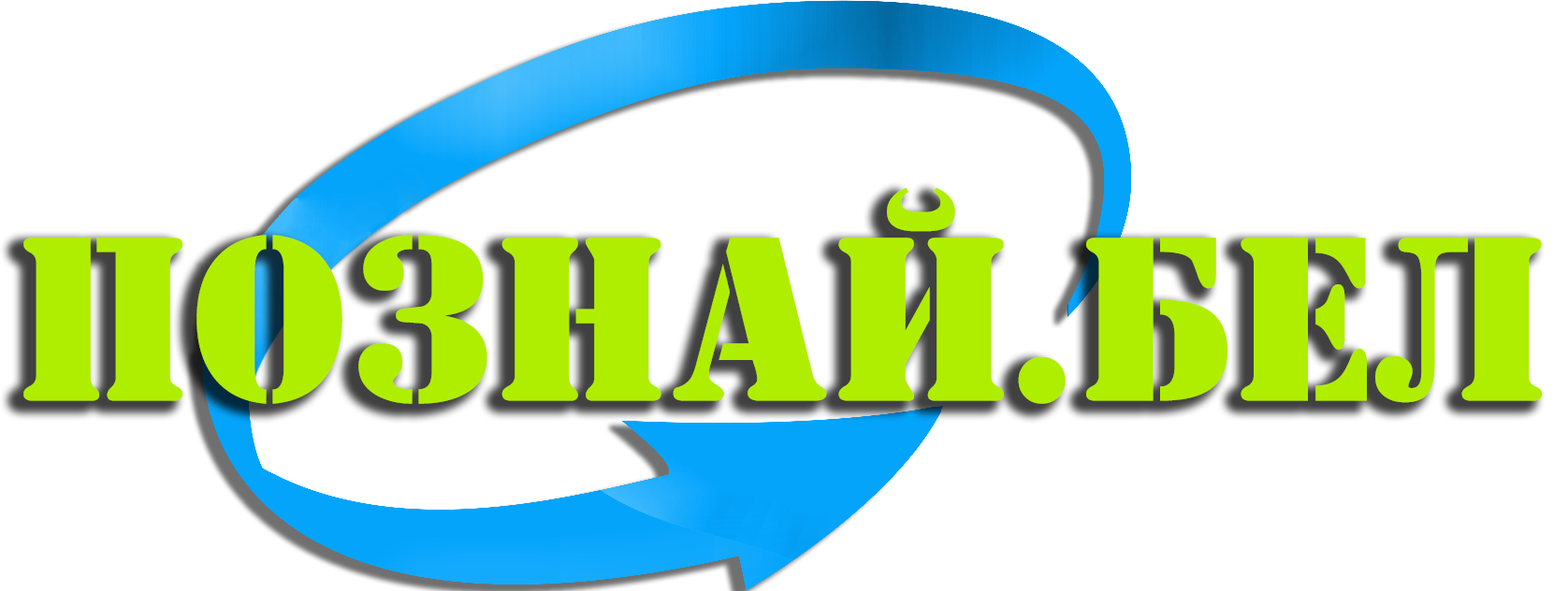
<style>
.page{position:relative;width:1568px;height:591px;background:#ffffff}
.page>*{position:absolute;margin:0}
.t1{font:226.1px "AStamperBold";color:#b0ee00}
</style>
<div class="page">
<p class="t1" style="left:23px;top:188px;width:1520px;height:216px">ПОЗНАЙ.БЕЛ</p>
</div>
